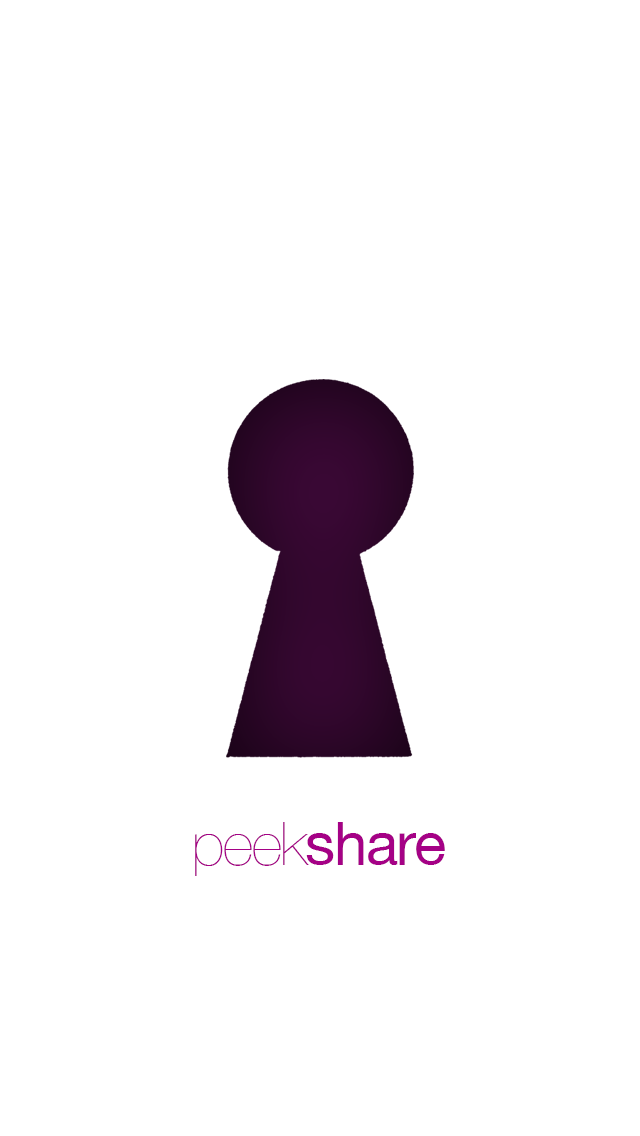
<style>
.page{position:relative;width:640px;height:1136px;background:#ffffff}
.page>*{position:absolute;margin:0}
.t1{font:60px "HelveticaNeue";letter-spacing:-0.025em;color:#a50186}
.t2{font:60px "HelveticaNeue-UltraLight";letter-spacing:-0.025em;color:#a50186}
</style>
<div class="page">
<p class="t1" style="left:195px;top:822px;width:250px;height:54px"><span class="t2">peek</span>share</p>
</div>
